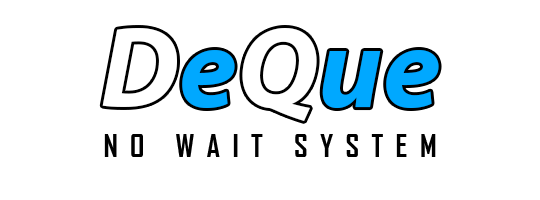
<style>
.page{position:relative;width:540px;height:200px;background:#ffffff}
.page>*{position:absolute;margin:0}
.t1{font:30px "AgencyFB-Bold";color:#000000}
</style>
<div class="page">
<p class="t1" style="left:104px;top:134px;width:332px;height:23px">N  O     W  A  I  T     S  Y  S  T  E  M</p>
</div>
